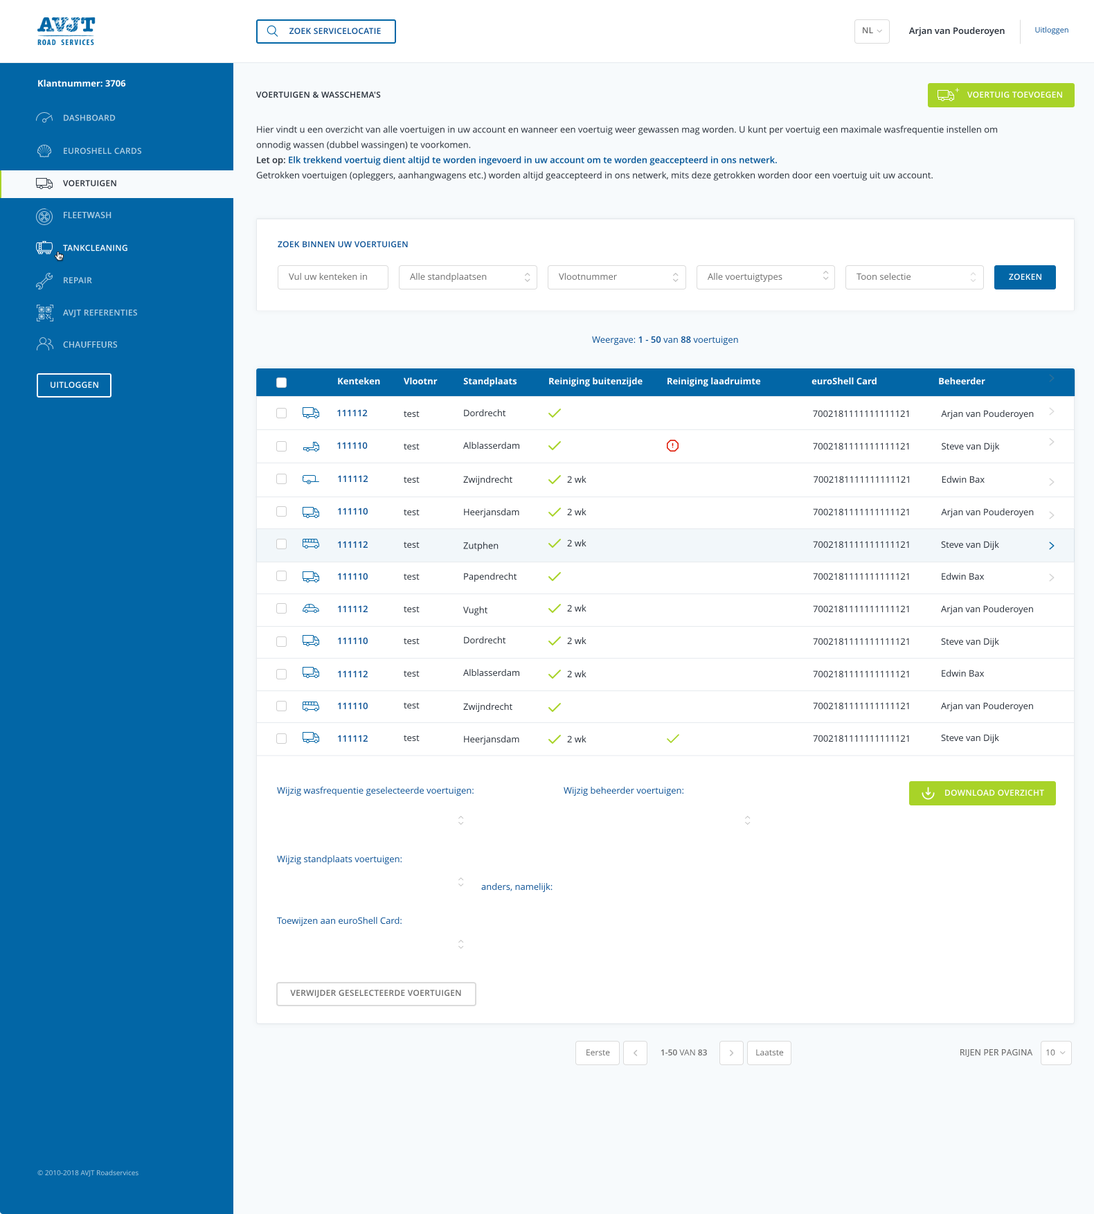
<style>
.page{position:relative;width:1094px;height:1214px;background:#ffffff}
.page>*{position:absolute;margin:0}
.t1{font:8.3px "OpenSans-Semibold";letter-spacing:0.023em;color:#0b5195;text-transform:uppercase}
.t2{font:8.3px "OpenSans-Semibold";letter-spacing:0.023em;color:#6d6d6d;text-transform:uppercase}
.t3{font:9px "OpenSans-Semibold";color:#262d37}
.t4{font:7.6px "OpenSans"}
.t5{font:9px "OpenSans-Bold";color:#ffffff}
.t6{font:8.3px "OpenSans"}
.t7{font:8.3px "OpenSans-Semibold";letter-spacing:0.023em;color:#262d37;text-transform:uppercase}
.t8{font:8.3px "OpenSans-Semibold";letter-spacing:0.023em;color:#ffffff;text-transform:uppercase}
.t9{font:8.3px "OpenSans-Semibold";letter-spacing:0.023em;color:#b3d1e4;text-transform:uppercase}
.t10{font:9px/15.2px "OpenSans";color:#262d37}
.t11{font:9px/15.2px "OpenSans-Semibold";color:#262d37}
.t12{font:9px/15.2px "OpenSans-Semibold";color:#005396}
.t13{font:8.3px "OpenSans-Semibold";letter-spacing:0.023em;color:#b4d1e4;text-transform:uppercase}
.t14{font:9px "OpenSans";color:#6d6d6d}
.t15{font:9px "OpenSans";color:#0b5195}
.t16{font:9px "OpenSans-Semibold";color:#0b5195}
.t17{font:9px "OpenSans";color:#262d37}
.t18{font:8.3px "OpenSans";color:#6d6d6d}
.t19{font:8.3px "OpenSans-Semibold";color:#6d6d6d;text-transform:uppercase}
.t20{font:8.3px "OpenSans";color:#6d6d6d;text-transform:uppercase}
.t21{font:8.3px "OpenSans";letter-spacing:0.025em;color:#6d6d6d;text-transform:uppercase}
.t22{font:6.9px "OpenSans"}
</style>
<div class="page">
<p class="t1" style="left:289px;top:28px;width:92px;height:7px">zoek servicelocatie</p>
<p class="t2" style="left:863px;top:27px;width:10px;height:6px">NL</p>
<p class="t3" style="left:908px;top:27px;width:97px;height:10px">Arjan van Pouderoyen</p>
<p class="t4" style="left:1035px;top:26px;width:33px;height:9px">Uitloggen</p>
<p class="t5" style="left:38px;top:80px;width:88px;height:7px">Klantnummer: 3706</p>
<p class="t6" style="left:955px;top:88px;width:5px;height:4px">+</p>
<p class="t7" style="left:256px;top:91px;width:125px;height:7px">Voertuigen &amp; wasschema's</p>
<p class="t8" style="left:967px;top:91px;width:95px;height:7px">voertuig toevoegen</p>
<p class="t9" style="left:64px;top:114px;width:52px;height:7px">dashboard</p>
<p class="t10" style="left:256px;top:125px;width:742px;height:56px">Hier vindt u een overzicht van alle voertuigen in uw account en wanneer een voertuig weer gewassen mag worden. U kunt per voertuig een maximale wasfrequentie instellen om onnodig wassen (dubbel wassingen) te voorkomen. <br><span class="t11">Let op: </span><span class="t12">Elk trekkend voertuig dient altijd te worden ingevoerd in uw account om te worden geaccepteerd in ons netwerk.<br></span>Getrokken voertuigen (opleggers, aanhangwagens etc.) worden altijd geaccepteerd in ons netwerk, mits deze getrokken worden door een voertuig uit uw account.</p>
<p class="t9" style="left:64px;top:147px;width:78px;height:7px">EuroShell Cards</p>
<p class="t7" style="left:63px;top:180px;width:53px;height:6px">voertuigen</p>
<p class="t13" style="left:64px;top:212px;width:47px;height:6px">fleetwash</p>
<p class="t8" style="left:63px;top:244px;width:64px;height:7px">tankcleaning</p>
<p class="t1" style="left:278px;top:241px;width:130px;height:7px">Zoek binnen uw voertuigen</p>
<p class="t9" style="left:64px;top:277px;width:28px;height:6px">repair</p>
<p class="t14" style="left:289px;top:273px;width:78px;height:7px">Vul uw kenteken in</p>
<p class="t14" style="left:410px;top:273px;width:77px;height:9px">Alle standplaatsen</p>
<p class="t14" style="left:559px;top:273px;width:58px;height:7px">Vlootnummer</p>
<p class="t14" style="left:708px;top:273px;width:74px;height:9px">Alle voertuigtypes</p>
<p class="t14" style="left:856px;top:273px;width:55px;height:7px">Toon selectie</p>
<p class="t8" style="left:1009px;top:273px;width:32px;height:7px">zoeken</p>
<p class="t13" style="left:63px;top:309px;width:74px;height:9px">avjt referenties</p>
<p class="t13" style="left:63px;top:341px;width:55px;height:7px">chauffeurs</p>
<p class="t15" style="left:592px;top:336px;width:146px;height:9px">Weergave: <span class="t16">1 - 50 </span>van<span class="t16"> 88 </span>voertuigen</p>
<p class="t5" style="left:338px;top:377px;width:42px;height:8px">Kenteken</p>
<p class="t5" style="left:404px;top:377px;width:34px;height:8px">Vlootnr</p>
<p class="t5" style="left:463px;top:377px;width:54px;height:10px">Standplaats</p>
<p class="t5" style="left:549px;top:377px;width:93px;height:10px">Reiniging buitenzijde</p>
<p class="t5" style="left:667px;top:377px;width:94px;height:10px">Reiniging laadruimte</p>
<p class="t5" style="left:811px;top:377px;width:65px;height:8px">euroShell Card</p>
<p class="t5" style="left:939px;top:377px;width:46px;height:8px">Beheerder</p>
<p class="t8" style="left:51px;top:381px;width:47px;height:7px">uitloggen</p>
<p class="t16" style="left:337px;top:409px;width:31px;height:8px">111112</p>
<p class="t17" style="left:404px;top:411px;width:16px;height:6px">test</p>
<p class="t17" style="left:464px;top:409px;width:42px;height:8px">Dordrecht</p>
<p class="t17" style="left:813px;top:410px;width:96px;height:7px">7002181111111111121</p>
<p class="t17" style="left:941px;top:410px;width:93px;height:10px">Arjan van Pouderoyen</p>
<p class="t16" style="left:337px;top:442px;width:31px;height:7px">111110</p>
<p class="t17" style="left:404px;top:443px;width:16px;height:7px">test</p>
<p class="t17" style="left:463px;top:442px;width:56px;height:7px">Alblasserdam</p>
<p class="t17" style="left:813px;top:442px;width:96px;height:8px">7002181111111111121</p>
<p class="t17" style="left:942px;top:442px;width:58px;height:10px">Steve van Dijk</p>
<p class="t16" style="left:338px;top:475px;width:30px;height:7px">111112</p>
<p class="t17" style="left:404px;top:476px;width:16px;height:7px">test</p>
<p class="t17" style="left:463px;top:476px;width:49px;height:9px">Zwijndrecht</p>
<p class="t17" style="left:567px;top:476px;width:19px;height:7px">2 wk</p>
<p class="t17" style="left:813px;top:476px;width:96px;height:7px">7002181111111111121</p>
<p class="t17" style="left:942px;top:476px;width:42px;height:7px">Edwin Bax</p>
<p class="t16" style="left:338px;top:507px;width:30px;height:8px">111110</p>
<p class="t17" style="left:404px;top:509px;width:16px;height:7px">test</p>
<p class="t17" style="left:464px;top:508px;width:55px;height:10px">Heerjansdam</p>
<p class="t17" style="left:567px;top:508px;width:19px;height:7px">2 wk</p>
<p class="t17" style="left:813px;top:508px;width:96px;height:8px">7002181111111111121</p>
<p class="t17" style="left:941px;top:508px;width:93px;height:10px">Arjan van Pouderoyen</p>
<p class="t16" style="left:338px;top:541px;width:30px;height:7px">111112</p>
<p class="t17" style="left:404px;top:541px;width:16px;height:7px">test</p>
<p class="t17" style="left:463px;top:541px;width:35px;height:10px">Zutphen</p>
<p class="t17" style="left:567px;top:539px;width:19px;height:7px">2 wk</p>
<p class="t17" style="left:813px;top:541px;width:96px;height:7px">7002181111111111121</p>
<p class="t17" style="left:941px;top:541px;width:58px;height:9px">Steve van Dijk</p>
<p class="t16" style="left:338px;top:573px;width:30px;height:7px">111110</p>
<p class="t17" style="left:404px;top:573px;width:16px;height:7px">test</p>
<p class="t17" style="left:464px;top:573px;width:53px;height:9px">Papendrecht</p>
<p class="t17" style="left:813px;top:573px;width:96px;height:7px">7002181111111111121</p>
<p class="t17" style="left:942px;top:573px;width:42px;height:7px">Edwin Bax</p>
<p class="t16" style="left:338px;top:605px;width:30px;height:7px">111112</p>
<p class="t17" style="left:404px;top:606px;width:16px;height:7px">test</p>
<p class="t17" style="left:463px;top:606px;width:24px;height:9px">Vught</p>
<p class="t17" style="left:567px;top:604px;width:19px;height:7px">2 wk</p>
<p class="t17" style="left:813px;top:605px;width:96px;height:8px">7002181111111111121</p>
<p class="t17" style="left:941px;top:605px;width:92px;height:10px">Arjan van Pouderoyen</p>
<p class="t16" style="left:338px;top:637px;width:30px;height:8px">111110</p>
<p class="t17" style="left:404px;top:638px;width:16px;height:7px">test</p>
<p class="t17" style="left:464px;top:636px;width:42px;height:8px">Dordrecht</p>
<p class="t17" style="left:567px;top:637px;width:19px;height:7px">2 wk</p>
<p class="t17" style="left:813px;top:638px;width:96px;height:7px">7002181111111111121</p>
<p class="t17" style="left:941px;top:638px;width:58px;height:9px">Steve van Dijk</p>
<p class="t16" style="left:338px;top:670px;width:30px;height:7px">111112</p>
<p class="t17" style="left:404px;top:670px;width:16px;height:7px">test</p>
<p class="t17" style="left:463px;top:669px;width:56px;height:7px">Alblasserdam</p>
<p class="t17" style="left:567px;top:670px;width:19px;height:7px">2 wk</p>
<p class="t17" style="left:813px;top:670px;width:96px;height:8px">7002181111111111121</p>
<p class="t17" style="left:942px;top:669px;width:42px;height:8px">Edwin Bax</p>
<p class="t16" style="left:338px;top:702px;width:30px;height:8px">111110</p>
<p class="t17" style="left:404px;top:702px;width:16px;height:7px">test</p>
<p class="t17" style="left:813px;top:702px;width:96px;height:8px">7002181111111111121</p>
<p class="t17" style="left:941px;top:702px;width:92px;height:10px">Arjan van Pouderoyen</p>
<p class="t17" style="left:463px;top:703px;width:49px;height:9px">Zwijndrecht</p>
<p class="t16" style="left:338px;top:735px;width:30px;height:6px">111112</p>
<p class="t17" style="left:404px;top:735px;width:16px;height:6px">test</p>
<p class="t17" style="left:464px;top:735px;width:55px;height:10px">Heerjansdam</p>
<p class="t17" style="left:567px;top:735px;width:19px;height:7px">2 wk</p>
<p class="t17" style="left:813px;top:735px;width:96px;height:7px">7002181111111111121</p>
<p class="t17" style="left:941px;top:734px;width:58px;height:10px">Steve van Dijk</p>
<p class="t15" style="left:277px;top:786px;width:197px;height:10px">Wijzig wasfrequentie geselecteerde voertuigen:</p>
<p class="t15" style="left:564px;top:786px;width:119px;height:10px">Wijzig beheerder voertuigen:</p>
<p class="t8" style="left:945px;top:789px;width:99px;height:7px">download overzicht</p>
<p class="t15" style="left:277px;top:855px;width:125px;height:10px">Wijzig standplaats voertuigen:</p>
<p class="t15" style="left:481px;top:883px;width:71px;height:9px">anders, namelijk:</p>
<p class="t15" style="left:277px;top:917px;width:125px;height:9px">Toewijzen aan euroShell Card:</p>
<p class="t2" style="left:290px;top:989px;width:171px;height:9px">Verwijder geselecteerde voertuigen</p>
<p class="t18" style="left:586px;top:1049px;width:24px;height:7px">Eerste</p>
<p class="t19" style="left:660px;top:1049px;width:47px;height:7px">1-50<span class="t20"> van </span>83</p>
<p class="t18" style="left:756px;top:1049px;width:28px;height:7px">Laatste</p>
<p class="t21" style="left:960px;top:1049px;width:73px;height:7px">RIJEN PER PAGIN<span class="t20">A</span></p>
<p class="t18" style="left:1046px;top:1049px;width:9px;height:7px">10</p>
<p class="t22" style="left:37px;top:1169px;width:101px;height:7px">© 2010-2018 AVJT Roadservices</p>
</div>
